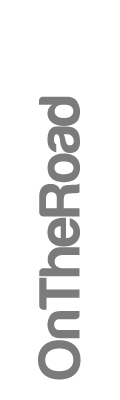
<style>
.page{position:relative;width:120px;height:400px;background:#ffffff}
.page>*{position:absolute;margin:0}
.t1{font:60px "Harabara-Bold";color:#7b7b7b}
</style>
<div class="page">
<p class="t1" style="left:38px;top:96px;width:43px;height:284px;rotate:-90deg">OnTheRoad</p>
</div>
